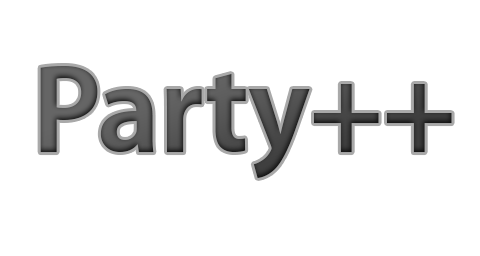
<style>
.page{position:relative;width:480px;height:256px;background:#ffffff}
.page>*{position:absolute;margin:0}
.t1{font:125px "MyriadApple-Bold";letter-spacing:-0.01em;color:#474747}
</style>
<div class="page">
<p class="t1" style="left:40px;top:66px;width:412px;height:112px">Party++</p>
</div>
